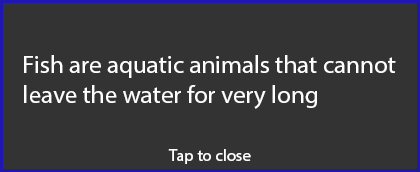
<style>
.page{position:relative;width:420px;height:172px;background:#333333}
.page>*{position:absolute;margin:0}
.t1{font:25px "MyriadPro-Regular";color:#ffffff}
.t2{font:16.7px "MyriadPro-Regular";color:#ffffff}
</style>
<div class="page">
<p class="t1" style="left:24px;top:55px;width:372px;height:54px">Fish are aquatic animals that cannot<br>leave the water for very long</p>
<p class="t2" style="left:168px;top:149px;width:83px;height:15px">Tap to close</p>
</div>
